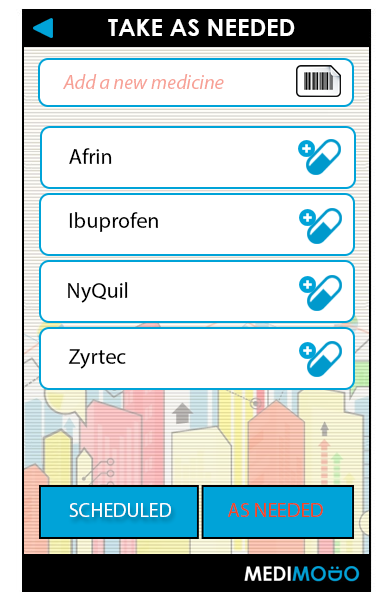
<style>
.page{position:relative;width:392px;height:602px;background:#ffffff}
.page>*{position:absolute;margin:0}
.t1{font:24px "CenturyGothic-Bold";color:#ffffff}
.t2{font:22px "MyriadPro-Regular";color:#000000}
.t3{font:20px "MyriadPro-Regular";color:#ffffff}
.t4{font:20px "MyriadPro-Regular";color:#f14624}
</style>
<div class="page">
<p class="t1" style="left:108px;top:19px;width:187px;height:17px">TAKE AS NEEDED</p>
<p class="t2" style="left:69px;top:148px;width:43px;height:16px">Afrin</p>
<p class="t2" style="left:69px;top:212px;width:89px;height:20px">Ibuprofen</p>
<p class="t2" style="left:68px;top:282px;width:60px;height:21px">NyQuil</p>
<p class="t2" style="left:68px;top:349px;width:58px;height:20px">Zyrtec</p>
<p class="t3" style="left:69px;top:503px;width:102px;height:14px">SCHEDULED</p>
<p class="t4" style="left:228px;top:503px;width:95px;height:14px">AS NEEDED</p>
</div>
